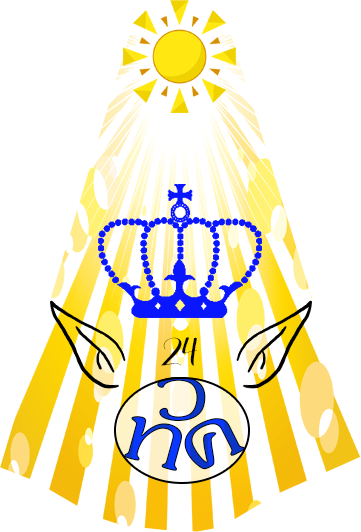
<style>
.page{position:relative;width:361px;height:532px;background:#ffffff}
.page>*{position:absolute;margin:0}
.t1{font:36px "Lovea";color:#080502}
.t2{font:108.7px "JasmineUPC";scale:1.34 1}
</style>
<div class="page">
<p class="t1" style="left:161px;top:337px;width:36px;height:29px">24</p>
<p class="t2" style="left:157px;top:377px;width:49px;height:44px">ว</p>
<p class="t2" style="left:124px;top:416px;width:59px;height:55px;rotate:15deg">ท</p>
<p class="t2" style="left:184px;top:418px;width:61px;height:52px;rotate:-27deg">ค</p>
</div>
